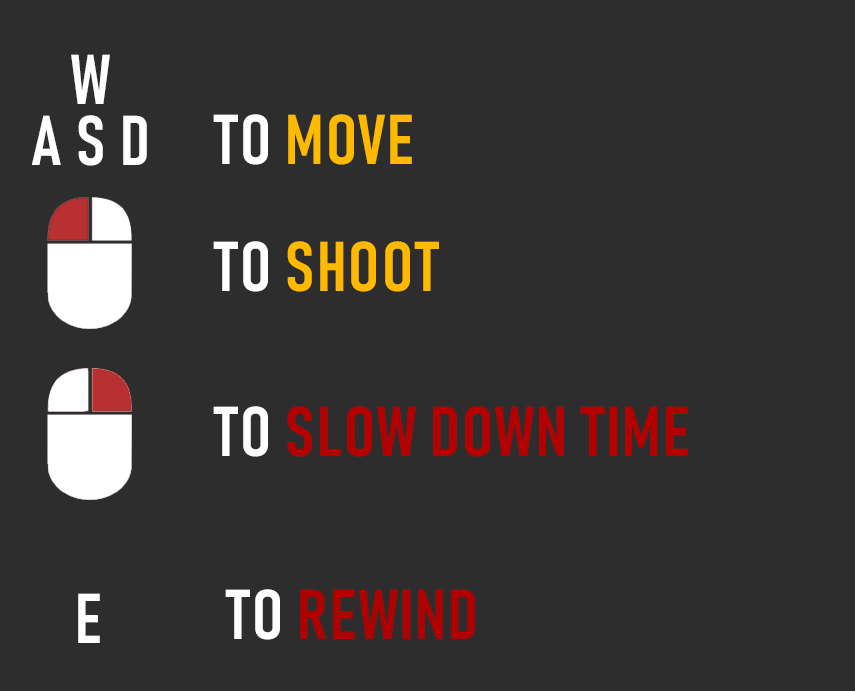
<style>
.page{position:relative;width:855px;height:691px;background:#2d2d2d}
.page>*{position:absolute;margin:0}
.t1{font:69.3px/61.3px "Bahnschrift-SemiBoldCondensed";letter-spacing:0.03em;color:#ffffff}
.t2{font:69.3px "Bahnschrift-SemiBoldCondensed";letter-spacing:0.03em;color:#ffba00}
.t3{font:69.3px "Bahnschrift-SemiBoldCondensed";letter-spacing:0.03em;color:#ffffff}
.t4{font:69.2px "Bahnschrift-SemiBoldCondensed";letter-spacing:0.03em;color:#ffba00}
.t5{font:69.2px "Bahnschrift-SemiBoldCondensed";letter-spacing:0.03em;color:#ffffff}
.t6{font:69.2px "Bahnschrift-SemiBoldCondensed";letter-spacing:0.03em;color:#b50000}
.t7{font:69.3px "Bahnschrift-SemiBoldCondensed";letter-spacing:0.03em;color:#b00000}
</style>
<div class="page">
<p class="t1" style="left:31px;top:54px;width:116px;height:112px;text-align:center">W<br>A S D</p>
<p class="t2" style="left:213px;top:114px;width:199px;height:51px"><span class="t3">  TO </span>MOVE</p>
<p class="t4" style="left:213px;top:241px;width:226px;height:51px"><span class="t5">TO </span>SHOOT</p>
<p class="t6" style="left:213px;top:406px;width:475px;height:51px"><span class="t5">TO </span>SLOW DOWN TIME</p>
<p class="t3" style="left:78px;top:593px;width:22px;height:50px">E</p>
<p class="t7" style="left:225px;top:589px;width:250px;height:51px"><span class="t3">TO </span>REWIND</p>
</div>
